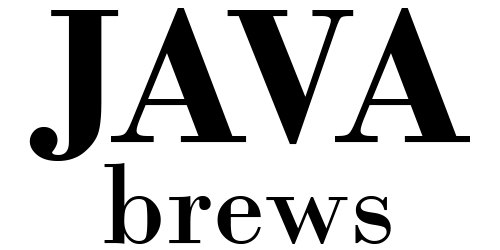
<style>
.page{position:relative;width:500px;height:250px;background:#ffffff}
.page>*{position:absolute;margin:0}
.t1{font:202.5px "BodoniMT-Bold";color:#000000}
.t2{font:121.5px "BodoniMT";color:#000000}
</style>
<div class="page">
<p class="t1" style="left:29px;top:8px;width:441px;height:153px">JAVA</p>
<p class="t2" style="left:104px;top:163px;width:287px;height:81px">brews</p>
</div>
